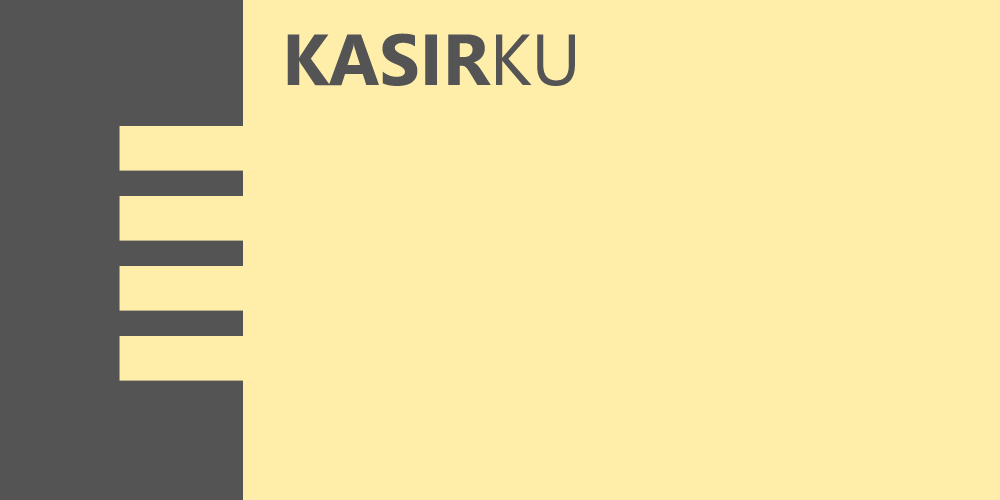
<style>
.page{position:relative;width:1000px;height:500px;background:#ffeeaa}
.page>*{position:absolute;margin:0}
.t1{font:72px "SegoeUI-Bold";color:#545454}
.t2{font:72px "SegoeUI";color:#545454}
</style>
<div class="page">
<p class="t1" style="left:287px;top:33px;width:288px;height:53px">KASIR<span class="t2">KU</span></p>
</div>
